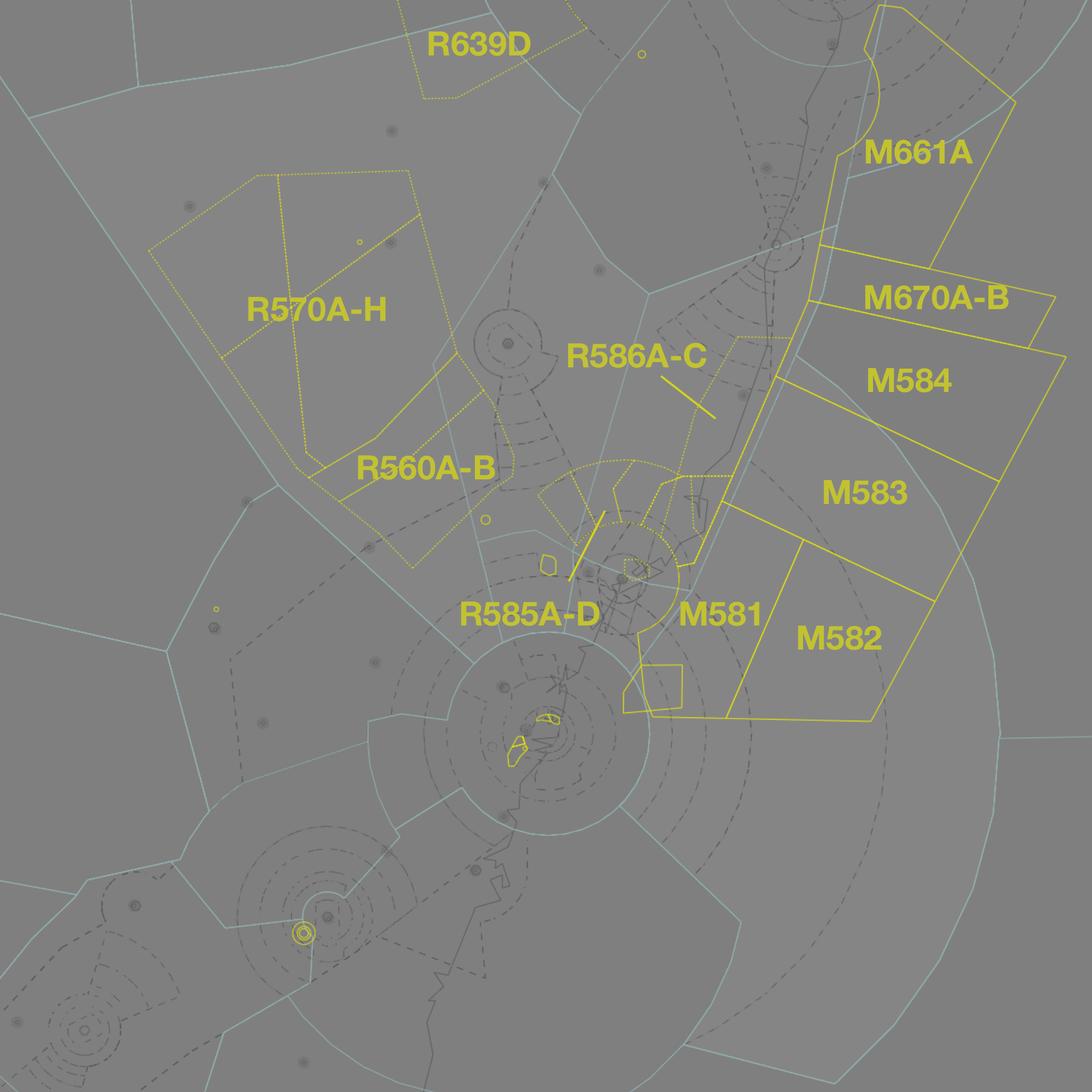
<style>
.page{position:relative;width:1092px;height:1092px;background:#7f7f7f}
.page>*{position:absolute;margin:0}
.t1{font:33.6px "HelveticaNeue-Bold";color:#c2c231}
</style>
<div class="page">
<p class="t1" style="left:428px;top:31px;width:103px;height:25px">R639D</p>
<p class="t1" style="left:866px;top:139px;width:107px;height:25px">M661A</p>
<p class="t1" style="left:865px;top:285px;width:144px;height:25px">M670A-B</p>
<p class="t1" style="left:248px;top:297px;width:138px;height:24px">R570A-H</p>
<p class="t1" style="left:568px;top:343px;width:139px;height:25px">R586A-C</p>
<p class="t1" style="left:868px;top:368px;width:84px;height:25px">M584</p>
<p class="t1" style="left:358px;top:455px;width:137px;height:25px">R560A-B</p>
<p class="t1" style="left:824px;top:480px;width:83px;height:25px">M583</p>
<p class="t1" style="left:461px;top:601px;width:139px;height:25px">R585A-D</p>
<p class="t1" style="left:680px;top:601px;width:79px;height:25px">M581</p>
<p class="t1" style="left:798px;top:626px;width:83px;height:24px">M582</p>
</div>
